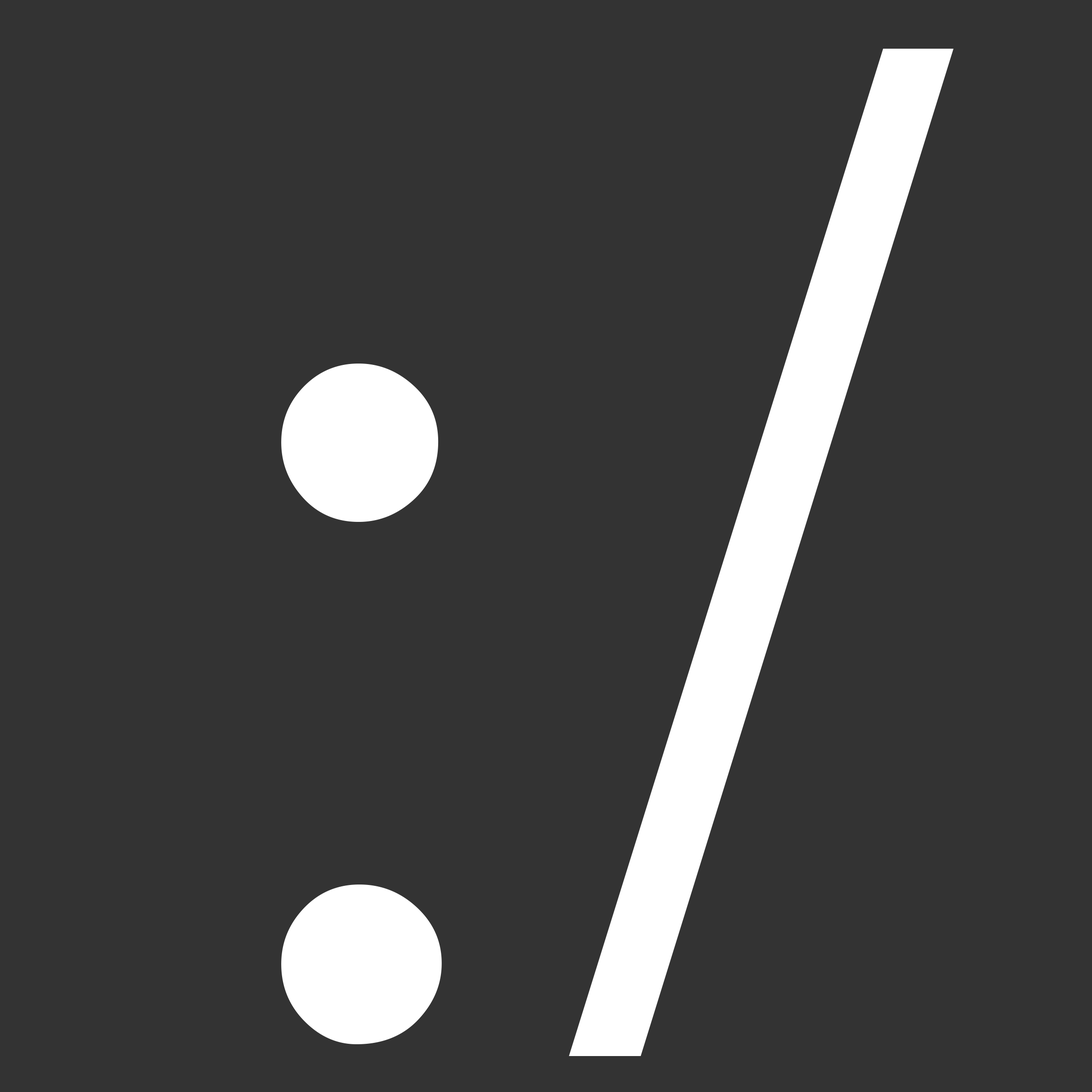
<style>
.page{position:relative;width:1092px;height:1092px;background:#333333}
.page>*{position:absolute;margin:0}
.t1{font:1454.7px "Times-Roman";color:#ffffff}
</style>
<div class="page">
<p class="t1" style="left:281px;top:49px;width:673px;height:1007px">:/</p>
</div>
